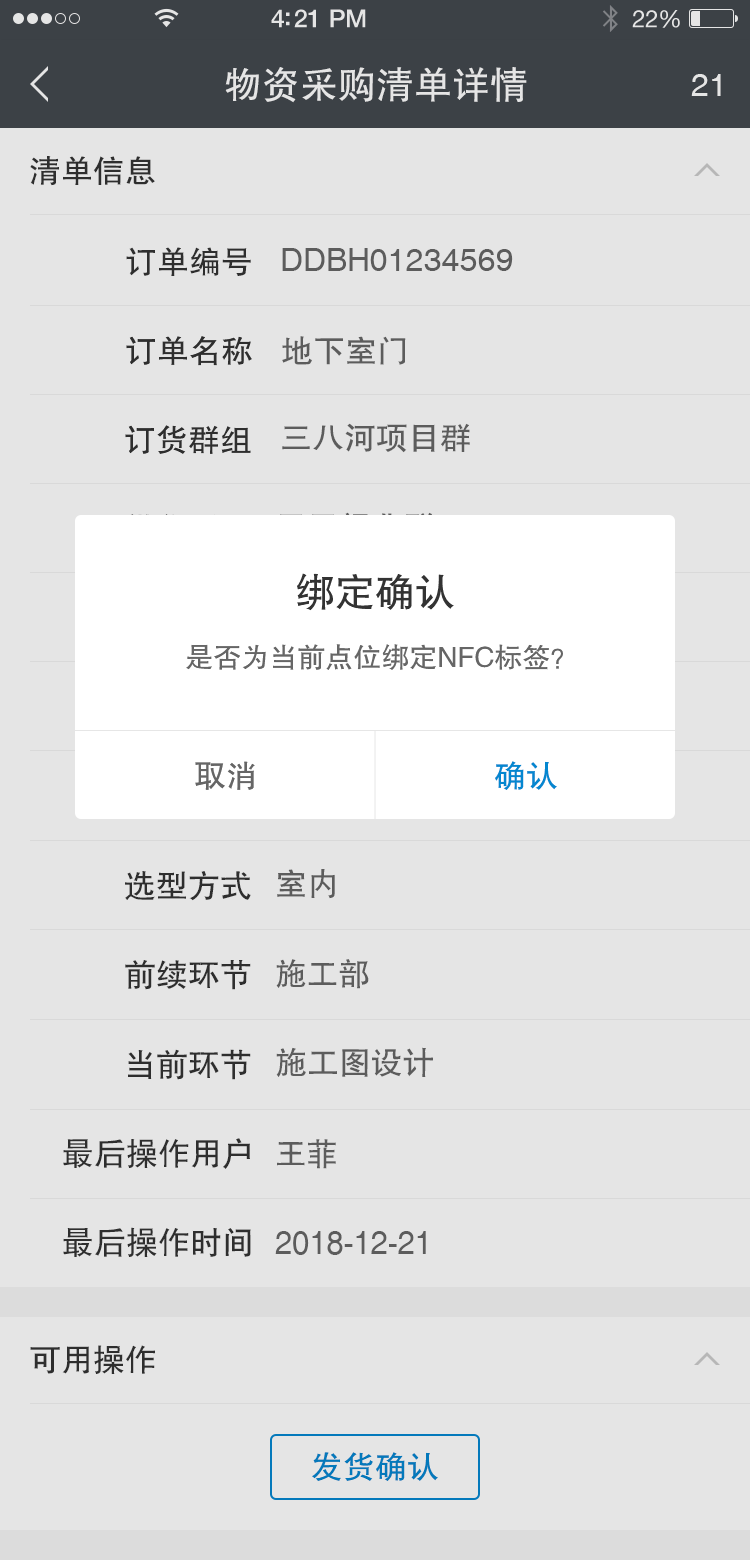
<style>
.page{position:relative;width:750px;height:1560px;background:#e5e5e5}
.page>*{position:absolute;margin:0}
.t1{font:38px "FZHTJW--GB1-0";color:#e5e5e5}
.t2{font:32px "Helvetica";color:#e5e5e5}
.t3{font:32px "FZHTJW--GB1-0";color:#333333}
.t4{font:32px "Helvetica";color:#666666}
.t5{font:32px "FZHTJW--GB1-0";color:#666666}
.t6{font:40px "FZHTJW--GB1-0";color:#333333}
.t7{font:28px "FZHTJW--GB1-0";color:#666666}
.t8{font:32px "FZHTJW--GB1-0";color:#0487d0}
.t9{font:32.3px "FZHTJW--GB1-0";color:#666666}
.t10{font:32.3px "FZHTJW--GB1-0";color:#333333}
.t11{font:32.4px "FZHTJW--GB1-0";color:#333333}
.t12{font:32.4px "FZHTJW--GB1-0";color:#666666}
.t13{font:32.6px "FZHTJW--GB1-0";color:#333333}
.t14{font:32.8px "FZHTJW--GB1-0";color:#333333}
</style>
<div class="page">
<p class="t1" style="left:225px;top:67px;width:302px;height:36px">物资采购清单详情</p>
<p class="t2" style="left:691px;top:74px;width:30px;height:22px">21</p>
<p class="t3" style="left:30px;top:156px;width:125px;height:30px">清单信息</p>
<p class="t3" style="left:126px;top:247px;width:125px;height:29px">订单编号</p>
<p class="t4" style="left:282px;top:248px;width:231px;height:23px">DDBH01234569</p>
<p class="t3" style="left:126px;top:336px;width:126px;height:30px">订单名称</p>
<p class="t5" style="left:282px;top:336px;width:124px;height:29px">地下室门</p>
<p class="t3" style="left:125px;top:425px;width:126px;height:29px">订货群组</p>
<p class="t5" style="left:282px;top:423px;width:188px;height:30px">三八河项目群</p>
<p class="t6" style="left:297px;top:573px;width:157px;height:38px">绑定确认</p>
<p class="t7" style="left:186px;top:644px;width:377px;height:26px">是否为当前点位绑定NFC标签？</p>
<p class="t5" style="left:195px;top:761px;width:60px;height:29px">取消</p>
<p class="t8" style="left:495px;top:761px;width:62px;height:29px">确认</p>
<p class="t9" style="left:277px;top:869px;width:58px;height:30px">室内</p>
<p class="t10" style="left:125px;top:871px;width:126px;height:30px">选型方式</p>
<p class="t10" style="left:125px;top:960px;width:126px;height:30px">前续环节</p>
<p class="t5" style="left:276px;top:959px;width:93px;height:30px">施工部</p>
<p class="t11" style="left:128px;top:1049px;width:123px;height:31px">当前环节</p>
<p class="t12" style="left:276px;top:1047px;width:157px;height:30px">施工图设计</p>
<p class="t13" style="left:63px;top:1138px;width:187px;height:31px">最后操作用户</p>
<p class="t5" style="left:277px;top:1139px;width:59px;height:30px">王菲</p>
<p class="t14" style="left:63px;top:1227px;width:188px;height:30px">最后操作时间</p>
<p class="t4" style="left:275px;top:1231px;width:151px;height:24px">2018-12-21</p>
<p class="t3" style="left:30px;top:1345px;width:125px;height:29px">可用操作</p>
<p class="t8" style="left:312px;top:1452px;width:126px;height:29px">发货确认</p>
</div>
